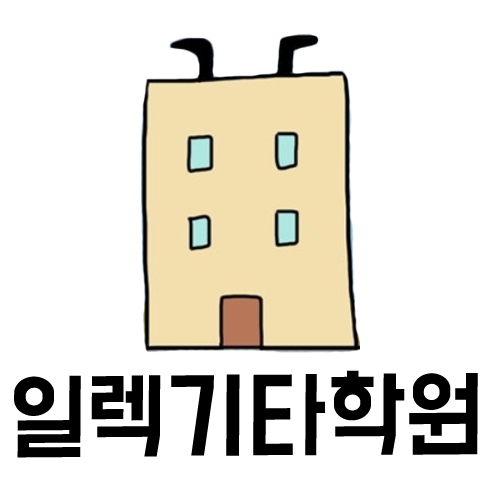
<style>
.page{position:relative;width:500px;height:500px;background:#ffffff}
.page>*{position:absolute;margin:0}
.t1{font:85.8px "BMDoHyeon";color:#000000;scale:0.96 1}
</style>
<div class="page">
<p class="t1" style="left:14px;top:370px;width:464px;height:88px">일렉기타학원</p>
</div>
